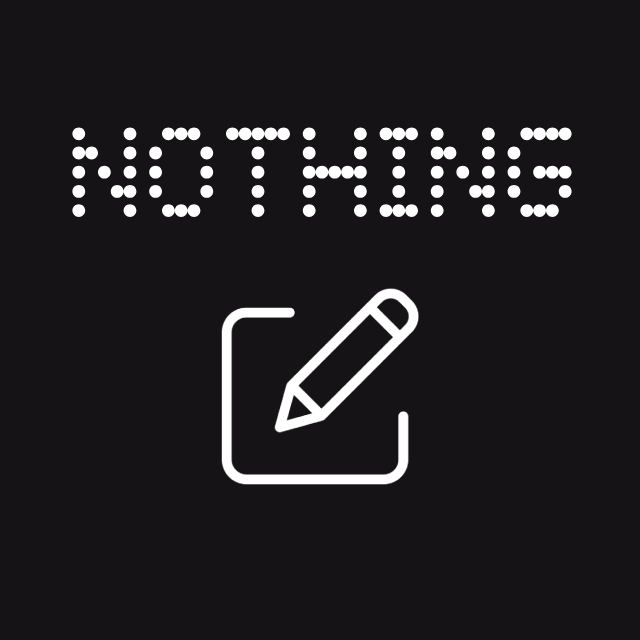
<style>
.page{position:relative;width:640px;height:640px;background:#161317}
.page>*{position:absolute;margin:0}
.t1{font:128px "Ndot-55";color:#ffffff}
</style>
<div class="page">
<p class="t1" style="left:72px;top:127px;width:500px;height:90px">NOTHING</p>
</div>
